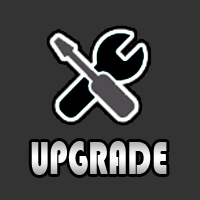
<style>
.page{position:relative;width:200px;height:200px;background:#333333}
.page>*{position:absolute;margin:0}
.t1{font:48px "Bauhaus93";scale:0.69 1}
</style>
<div class="page">
<p class="t1" style="left:31px;top:141px;width:136px;height:34px">UPGRADE</p>
</div>
